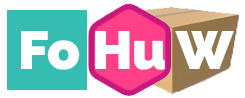
<style>
.page{position:relative;width:245px;height:98px;background:#ffffff}
.page>*{position:absolute;margin:0}
.t1{font:53.6px "RalewayRoman-Black";color:#ffffff}
</style>
<div class="page">
<p class="t1" style="left:21px;top:31px;width:213px;height:39px">Fo Hu W</p>
</div>
